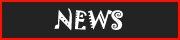
<style>
.page{position:relative;width:180px;height:40px;background:#232323}
.page>*{position:absolute;margin:0}
.t1{font:22px "Jokerman-Regular";color:#ffffff}
</style>
<div class="page">
<p class="t1" style="left:54px;top:8px;width:69px;height:23px">NEWS</p>
</div>
